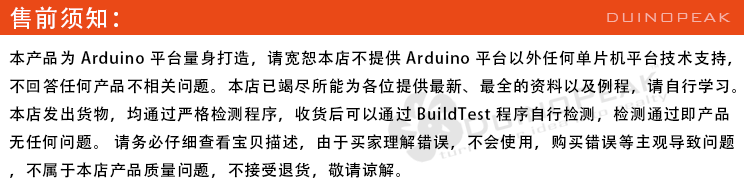
<style>
.page{position:relative;width:744px;height:194px;background:#ffffff}
.page>*{position:absolute;margin:0}
.t1{font:24px "AdobeHeitiStd-Regular";letter-spacing:0.05em;color:#ffffff}
.t2{font:18px "BankGothicBT-Light";letter-spacing:0.05em;color:#f5b3a7}
.t3{font:16px "AdobeHeitiStd-Regular";letter-spacing:0.05em;color:#000000}
</style>
<div class="page">
<p class="t1" style="left:10px;top:6px;width:108px;height:23px">售前须知：</p>
<p class="t2" style="left:607px;top:13px;width:124px;height:9px">DUINOPEAK</p>
<p class="t3" style="left:9px;top:50px;width:727px;height:128px">本产品为 Arduino 平台量身打造，请宽恕本店不提供 Arduino 平台以外任何单片机平台技术支持，<br>不回答任何产品不相关问题。本店已竭尽所能为各位提供最新、最全的资料以及例程，请自行学习。<br>本店发出货物，均通过严格检测程序，收货后可以通过 BuildTest 程序自行检测，检测通过即产品<br>无任何问题。 请务必仔细查看宝贝描述，由于买家理解错误，不会使用，购买错误等主观导致问题<br>，不属于本店产品质量问题，不接受退货，敬请谅解。</p>
</div>
